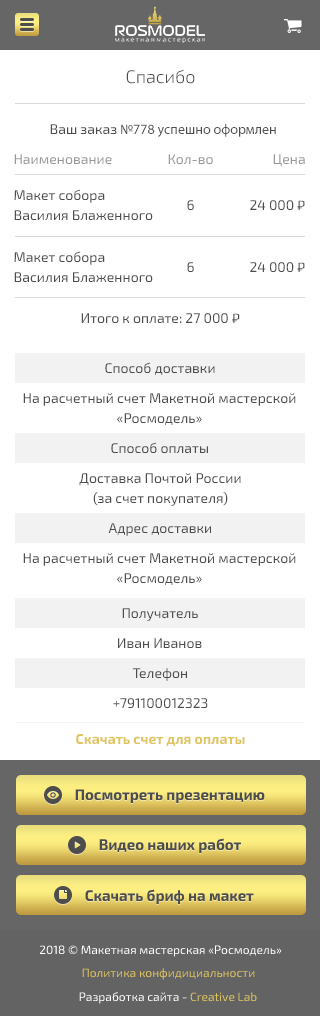
<style>
.page{position:relative;width:320px;height:1016px;background:#ffffff}
.page>*{position:absolute;margin:0}
.t1{font:18px "Exo2-Light";color:#4d4d4d}
.t2{font:14px "MyriadPro-Regular";color:#4d4d4d}
.t3{font:14px "Exo2-Regular";color:#4d4d4d}
.t4{font:14px "Exo2-Regular";color:#999999}
.t5{font:14px/20px "Exo2-Regular";color:#4d4d4d}
.t6{font:14px "Play-Regular";color:#4d4d4d}
.t7{font:14px "Exo2-Bold";color:#dfc560}
</style>
<div class="page">
<p class="t1" style="left:126px;top:69px;width:69px;height:15px">Спасибо</p>
<p class="t2" style="left:50px;top:124px;width:226px;height:13px"><span class="t3">Ваш заказ </span>№778 успешно оформлен</p>
<p class="t4" style="left:14px;top:154px;width:98px;height:11px">Наименование</p>
<p class="t4" style="left:168px;top:154px;width:45px;height:11px">Кол-во</p>
<p class="t4" style="left:273px;top:154px;width:32px;height:13px">Цена</p>
<p class="t5" style="left:14px;top:189px;width:139px;height:32px">Макет собора <br>Василия Блаженного</p>
<p class="t3" style="left:187px;top:200px;width:7px;height:11px">6</p>
<p class="t3" style="left:250px;top:200px;width:55px;height:11px">24 000 <span class="t6">₽</span></p>
<p class="t5" style="left:14px;top:251px;width:139px;height:32px">Макет собора <br>Василия Блаженного</p>
<p class="t3" style="left:187px;top:262px;width:7px;height:11px">6</p>
<p class="t3" style="left:250px;top:262px;width:55px;height:11px">24 000 <span class="t6">₽</span></p>
<p class="t3" style="left:81px;top:313px;width:159px;height:11px">Итого к оплате: 27 000 <span class="t6">₽</span></p>
<p class="t3" style="left:105px;top:362px;width:110px;height:13px">Способ доставки</p>
<p class="t5" style="left:23px;top:393px;width:273px;height:32px;text-align:center">На расчетный счет Макетной мастерской<br>«Росмодель»</p>
<p class="t3" style="left:111px;top:442px;width:97px;height:12px">Способ оплаты</p>
<p class="t5" style="left:79px;top:473px;width:162px;height:33px;text-align:center">Доставка Почтой России<br>(за счет покупателя)</p>
<p class="t3" style="left:108px;top:523px;width:103px;height:13px">Адрес доставки</p>
<p class="t5" style="left:23px;top:553px;width:273px;height:32px;text-align:center">На расчетный счет Макетной мастерской<br>«Росмодель»</p>
<p class="t3" style="left:122px;top:608px;width:76px;height:13px">Получатель</p>
<p class="t3" style="left:118px;top:638px;width:84px;height:11px">Иван Иванов</p>
<p class="t3" style="left:132px;top:668px;width:55px;height:13px">Телефон</p>
<p class="t3" style="left:113px;top:698px;width:95px;height:11px">+791100012323</p>
<p class="t7" style="left:76px;top:734px;width:169px;height:12px">Скачать счет для оплаты</p>
</div>
